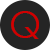
<style>
.page{position:relative;width:50px;height:50px;background:#252525}
.page>*{position:absolute;margin:0}
.t1{font:37px "CenturyGothic";color:#d20000}
</style>
<div class="page">
<p class="t1" style="left:11px;top:11px;width:28px;height:28px">Q</p>
</div>
